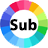
<style>
.page{position:relative;width:48px;height:48px;background:#ffffff}
.page>*{position:absolute;margin:0}
.t1{font:16px "MyriadPro-Bold";color:#000000}
</style>
<div class="page">
<p class="t1" style="left:10px;top:18px;width:27px;height:13px">Sub</p>
</div>
